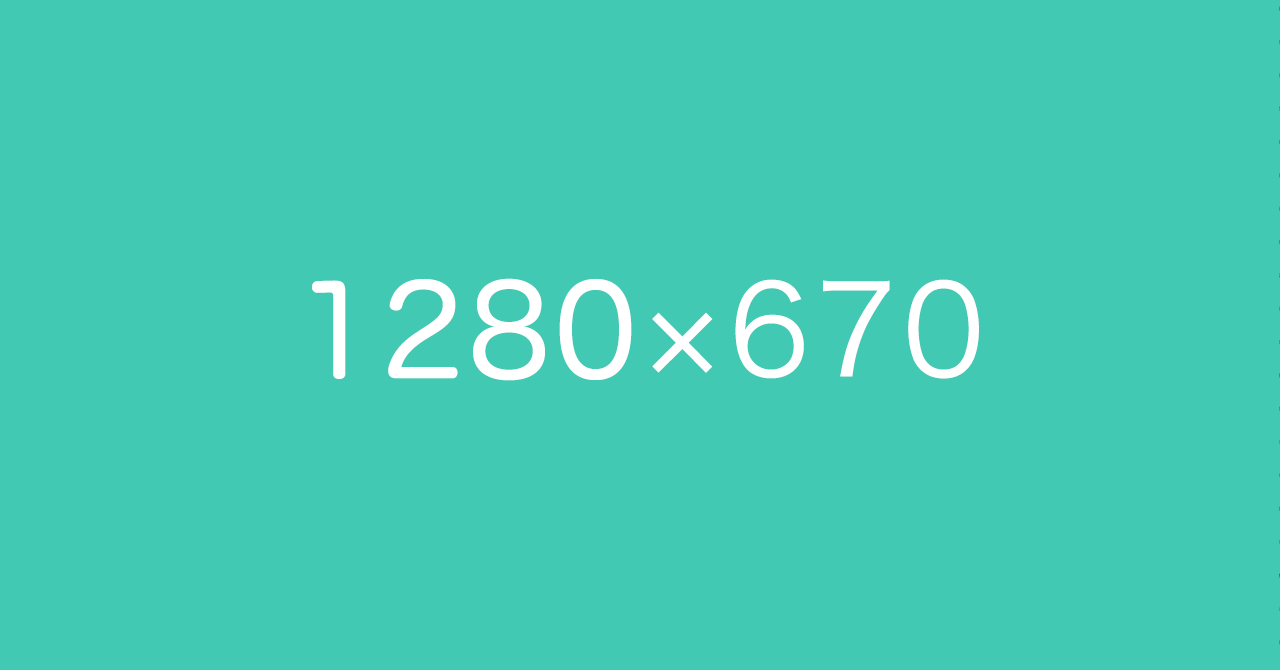
<style>
.page{position:relative;width:1280px;height:670px;background:#41c9b3}
.page>*{position:absolute;margin:0}
.t1{font:125px "HiraMaruProN-W4";letter-spacing:0.04em;color:#ffffff}
.t2{font:125px "HiraKakuProN-W3";letter-spacing:0.04em;color:#ffffff}
</style>
<div class="page">
<p class="t1" style="left:312px;top:278px;width:667px;height:103px">1280<span class="t2">×670</span></p>
</div>
